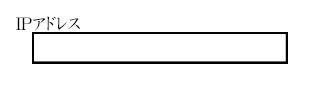
<style>
.page{position:relative;width:320px;height:96px;background:#ffffff}
.page>*{position:absolute;margin:0}
.t1{font:18px "HGSeikaishotaiPRO";color:#000000}
</style>
<div class="page">
<p class="t1" style="left:16px;top:16px;width:64px;height:15px">IPアドレス</p>
</div>
